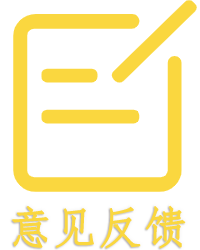
<style>
.page{position:relative;width:200px;height:250px;background:#ffffff}
.page>*{position:absolute;margin:0}
.t1{font:44px "FangSong";color:#fad73f;font-weight:bold}
</style>
<div class="page">
<p class="t1" style="left:12px;top:205px;width:174px;height:44px">意见反馈</p>
</div>
